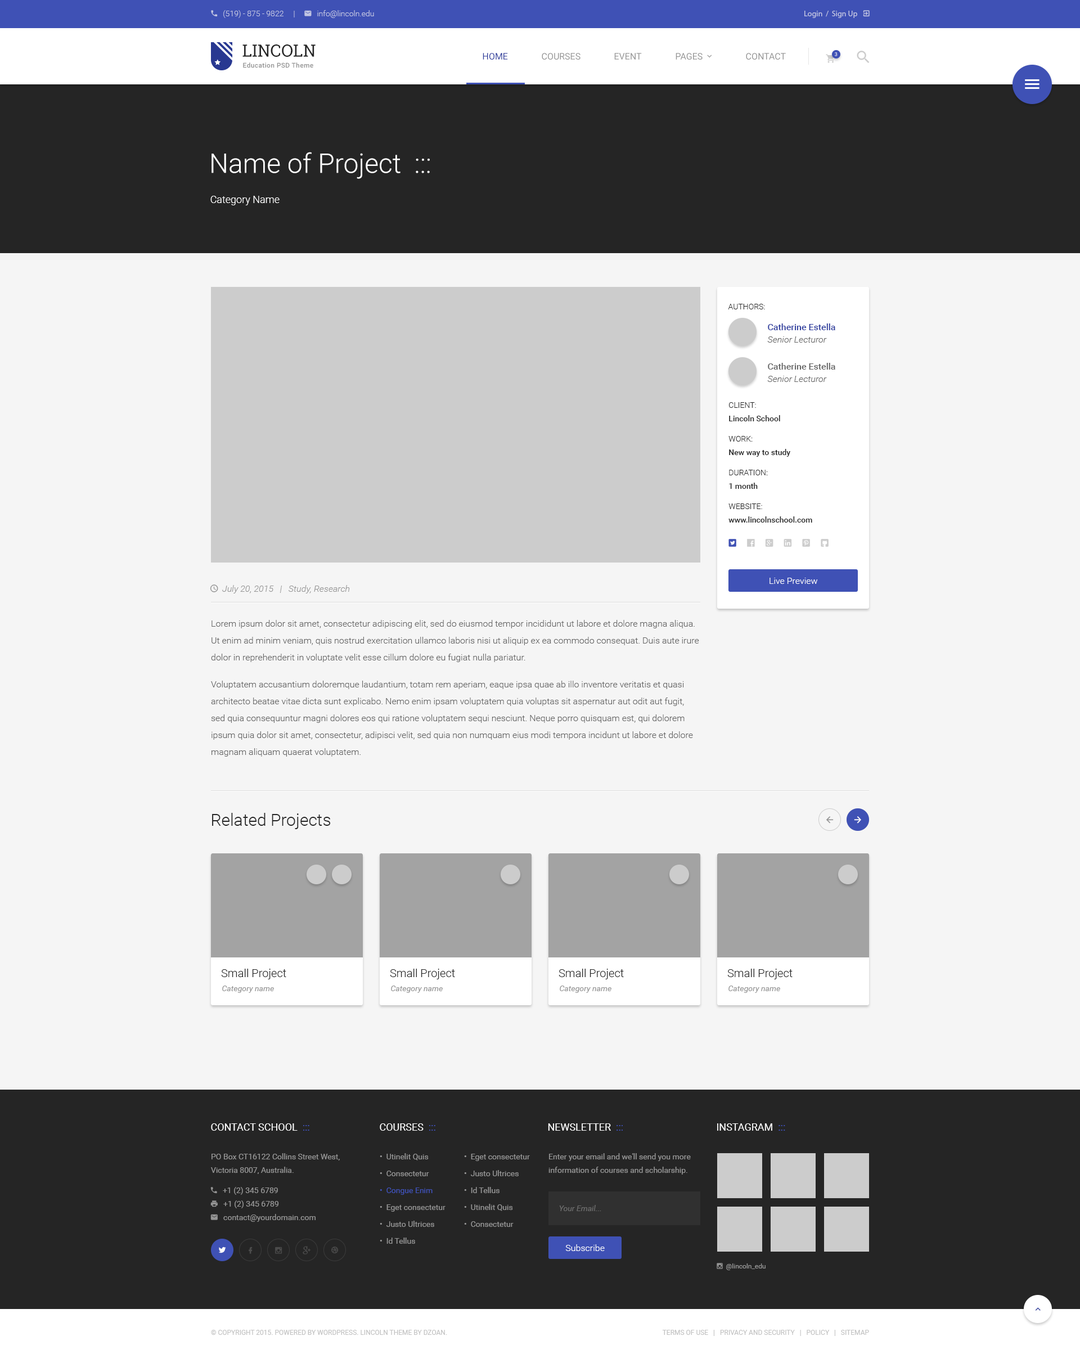
<style>
.page{position:relative;width:1080px;height:1354px;background:#f5f5f5}
.page>*{position:absolute;margin:0}
.t1{font:16.9px "RobotoSlab-Regular";color:#252525;text-transform:uppercase}
.t2{font:9px "Roboto-Regular";color:#303f9f;text-transform:uppercase}
.t3{font:9px "Roboto-Regular";color:#959595;text-transform:uppercase}
.t4{font:5.1px "Roboto-Regular";text-transform:uppercase}
.t5{font:6.8px "Roboto-Medium";letter-spacing:0.03em;color:#959595}
.t6{font:27px "Roboto-Light";color:#ffffff}
.t7{font:10.1px "Roboto-Light";color:#ffffff}
.t8{font:7.9px "Roboto-Light";color:#252525;text-transform:uppercase}
.t9{font:9px "Roboto-Medium";color:#303f9f}
.t10{font:9px "Roboto-LightItalic";color:#636363}
.t11{font:9px "Roboto-Medium";color:#636363}
.t12{font:7.9px/13.5px "Roboto-Medium";color:#252525}
.t13{font:7.9px/13.5px "Roboto-Light";color:#252525;text-transform:uppercase}
.t14{font:7.9px/20.2px "Roboto-Light";color:#252525;text-transform:uppercase}
.t15{font:9px "Roboto-Light";color:#ffffff}
.t16{font:9px/16.9px "Roboto-Light";color:#636363}
.t17{font:9px/27px "Roboto-Light";color:#636363}
.t18{font:16.9px "Roboto-Light";color:#252525}
.t19{font:11.2px "Roboto-Light";color:#252525}
.t20{font:7.9px "Roboto-Italic";color:#959595}
.t21{font:10.1px "Roboto-Regular";color:#ffffff;text-transform:uppercase}
.t22{font:10.1px "Roboto-Regular";color:#3f51b5;text-transform:uppercase}
.t23{font:7.9px/16.9px "Roboto-Regular";color:#959595}
.t24{font:7.9px/16.9px "Roboto-Regular";color:#3f51b5}
.t25{font:7.9px/13.5px "Roboto-Regular";color:#959595}
.t26{font:7.9px "Roboto-Italic";color:#6c6c6c}
.t27{font:6.8px "Roboto-Regular";color:#c2c2c2;text-transform:uppercase}
</style>
<div class="page">
<p class="t1" style="left:242px;top:44px;width:74px;height:13px">Lincoln</p>
<p class="t2" style="left:483px;top:53px;width:25px;height:7px">Home</p>
<p class="t3" style="left:542px;top:53px;width:38px;height:7px">Courses</p>
<p class="t3" style="left:614px;top:53px;width:28px;height:7px">Event</p>
<p class="t3" style="left:746px;top:53px;width:40px;height:7px">Contact</p>
<p class="t4" style="left:835px;top:52px;width:3px;height:4px">3</p>
<p class="t5" style="left:243px;top:62px;width:70px;height:6px">Education PSD Theme</p>
<p class="t6" style="left:212px;top:152px;width:218px;height:27px">Name of Project  :::</p>
<p class="t7" style="left:210px;top:196px;width:70px;height:9px">Category Name</p>
<p class="t8" style="left:728px;top:304px;width:37px;height:5px">Authors:</p>
<p class="t9" style="left:768px;top:323px;width:67px;height:7px">Catherine Estella</p>
<p class="t10" style="left:767px;top:336px;width:60px;height:7px">Senior Lecturor</p>
<p class="t11" style="left:768px;top:363px;width:67px;height:7px">Catherine Estella</p>
<p class="t10" style="left:767px;top:376px;width:60px;height:6px">Senior Lecturor</p>
<p class="t12" style="left:728px;top:402px;width:84px;height:121px"><span class="t13">Client:<br></span>Lincoln School<br><span class="t14">Work:<br></span>New way to study<br><span class="t14">Duration:<br></span>1 month<br><span class="t14">Website:<br></span>www.lincolnschool.com</p>
<p class="t15" style="left:770px;top:578px;width:48px;height:6px">Live Preview</p>
<p class="t16" style="left:211px;top:620px;width:488px;height:137px">Lorem ipsum dolor sit amet, consectetur adipiscing elit, sed do eiusmod tempor incididunt ut labore et dolore magna aliqua. Ut enim ad minim veniam, quis nostrud exercitation ullamco laboris nisi ut aliquip ex ea commodo consequat. Duis aute irure dolor in reprehenderit in voluptate velit esse cillum dolore eu fugiat nulla pariatur.<br><span class="t17">Voluptatem</span> accusantium doloremque laudantium, totam rem aperiam, eaque ipsa quae ab illo inventore veritatis et quasi architecto beatae vitae dicta sunt explicabo. Nemo enim ipsam voluptatem quia voluptas sit aspernatur aut odit aut fugit, sed quia consequuntur magni dolores eos qui ratione voluptatem sequi nesciunt. Neque porro quisquam est, qui dolorem ipsum quia dolor sit amet, consectetur, adipisci velit, sed quia non numquam eius modi tempora incidunt ut labore et dolore magnam aliquam quaerat voluptatem.</p>
<p class="t18" style="left:212px;top:813px;width:119px;height:16px">Related Projects</p>
<p class="t19" style="left:221px;top:969px;width:65px;height:10px">Small Project</p>
<p class="t19" style="left:390px;top:969px;width:65px;height:10px">Small Project</p>
<p class="t19" style="left:559px;top:969px;width:65px;height:10px">Small Project</p>
<p class="t19" style="left:727px;top:969px;width:66px;height:10px">Small Project</p>
<p class="t20" style="left:222px;top:986px;width:52px;height:7px">Category name</p>
<p class="t20" style="left:391px;top:986px;width:52px;height:7px">Category name</p>
<p class="t20" style="left:560px;top:986px;width:51px;height:7px">Category name</p>
<p class="t20" style="left:728px;top:986px;width:52px;height:7px">Category name</p>
<p class="t21" style="left:211px;top:1123px;width:98px;height:8px">Contact School  <span class="t22">:::</span></p>
<p class="t21" style="left:380px;top:1123px;width:55px;height:8px">Courses  <span class="t22">:::</span></p>
<p class="t21" style="left:548px;top:1123px;width:75px;height:8px">Newsletter  <span class="t22">:::</span></p>
<p class="t21" style="left:717px;top:1123px;width:68px;height:8px">Instagram  <span class="t22">:::</span></p>
<p class="t23" style="left:380px;top:1153px;width:66px;height:91px">•  Utinelit Quis<br>•  Consectetur<br><span class="t24">•  Congue Enim<br></span>•  Eget consectetur<br>•  Justo Ultrices<br>•  Id Tellus</p>
<p class="t23" style="left:464px;top:1154px;width:66px;height:73px">•  Eget consectetur<br>•  Justo Ultrices<br>•  Id Tellus<br>•  Utinelit Quis<br>•  Consectetur</p>
<p class="t25" style="left:548px;top:1153px;width:143px;height:21px">Enter your email and we'll send you more information of courses and scholarship.</p>
<p class="t26" style="left:559px;top:1205px;width:42px;height:6px">Your Email...</p>
<p class="t15" style="left:565px;top:1244px;width:40px;height:7px">Subscribe</p>
<p class="t27" style="left:211px;top:1330px;width:236px;height:5px">© Copyright 2015. Powered by WordPress. Lincoln Theme by DZOAN.</p>
<p class="t27" style="left:662px;top:1330px;width:207px;height:6px">Terms of Use   |   Privacy and Security   |   Policy   |   Sitemap</p>
</div>
